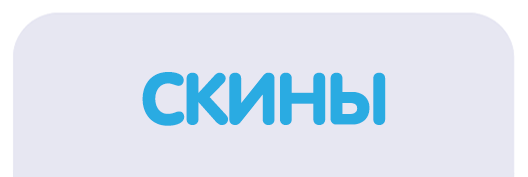
<style>
.page{position:relative;width:528px;height:177px;background:#e7e7f2}
.page>*{position:absolute;margin:0}
.t1{font:72px "VAGWorld-Bold";color:#2aabe2}
</style>
<div class="page">
<p class="t1" style="left:142px;top:72px;width:244px;height:54px">СКИНЫ</p>
</div>
